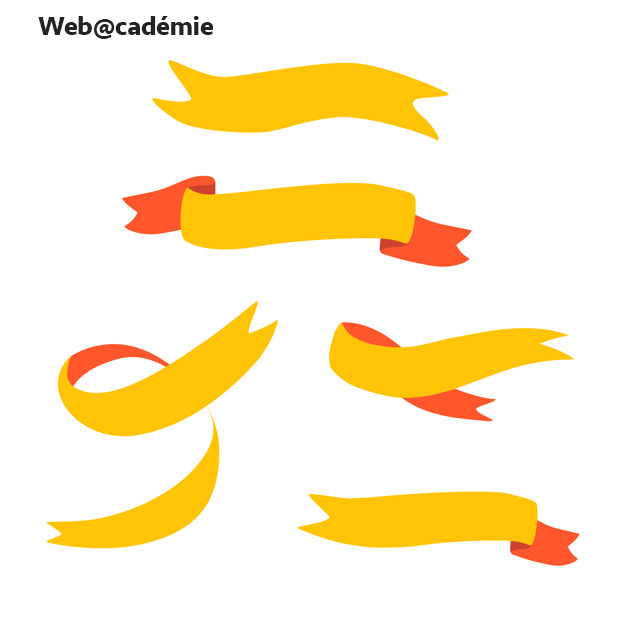
<style>
.page{position:relative;width:626px;height:626px;background:#ffffff}
.page>*{position:absolute;margin:0}
.t1{font:27.1px "Seravek-Bold";letter-spacing:-0.02em;color:#252425}
</style>
<div class="page">
<p class="t1" style="left:38px;top:16px;width:176px;height:23px">Web@cadémie</p>
</div>
